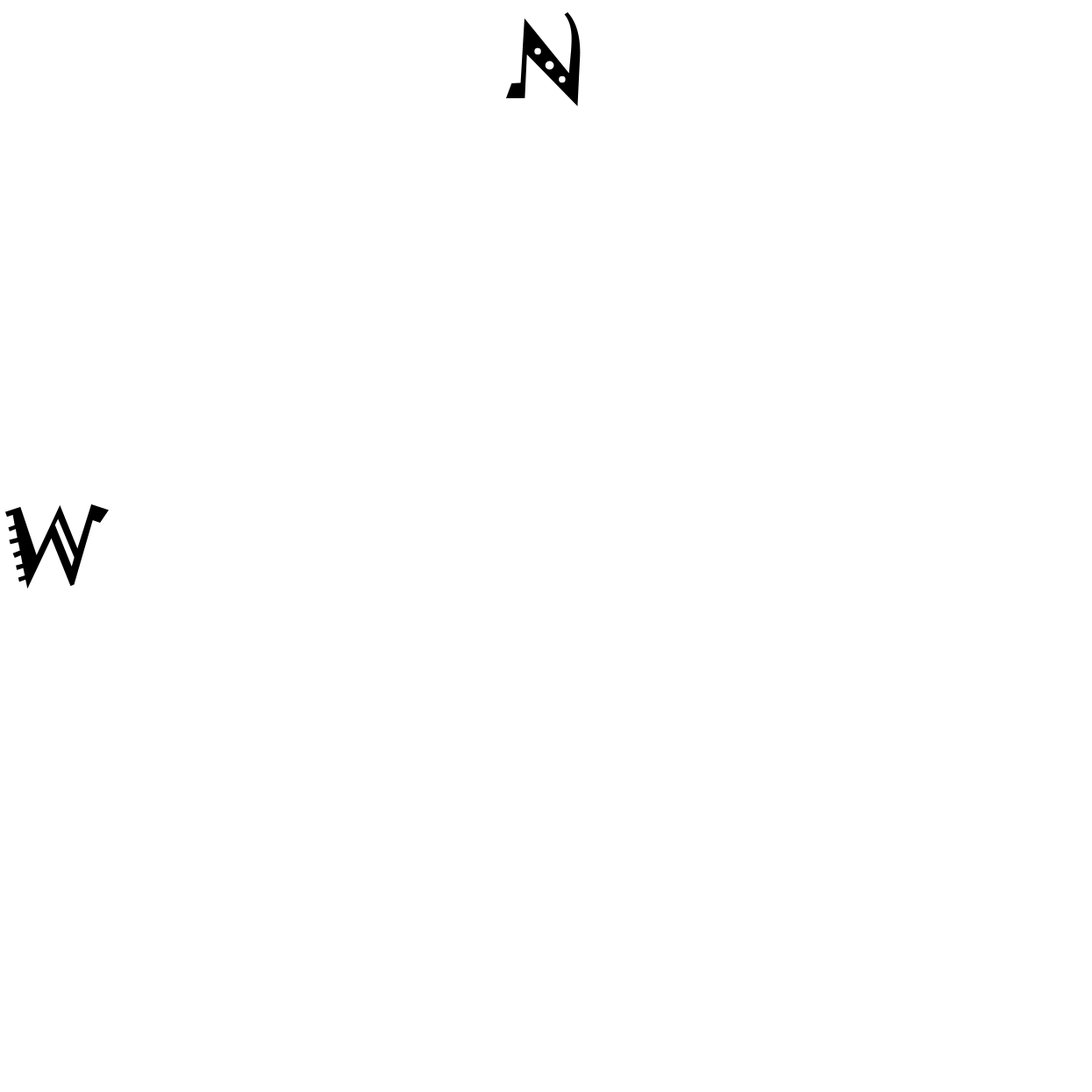
<style>
.page{position:relative;width:1092px;height:1092px;background:#ffffff}
.page>*{position:absolute;margin:0}
.t1{font:94.7px "Jokerman-Regular";color:#000000}
</style>
<div class="page">
<p class="t1" style="left:506px;top:12px;width:75px;height:94px">N</p>
<p class="t1" style="left:5px;top:504px;width:104px;height:85px">W</p>
</div>
